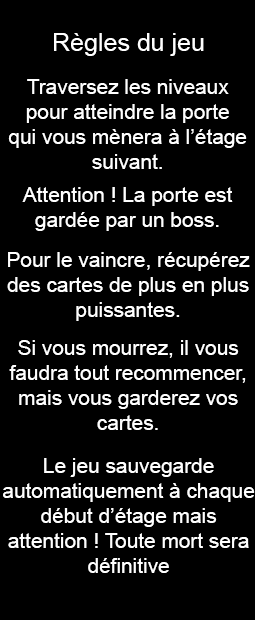
<style>
.page{position:relative;width:255px;height:620px;background:#000000}
.page>*{position:absolute;margin:0}
.t1{font:25px "ArialMT";color:#ffffff}
.t2{font:20.8px "ArialMT";color:#ffffff}
</style>
<div class="page">
<p class="t1" style="left:54px;top:33px;width:150px;height:23px">Règles du jeu</p>
<p class="t2" style="left:8px;top:79px;width:239px;height:90px;text-align:center">Traversez les niveaux<br>pour atteindre la porte<br>qui vous mènera à l’étage suivant.</p>
<p class="t2" style="left:22px;top:187px;width:211px;height:44px;text-align:center">Attention ! La porte est gardée par un boss.</p>
<p class="t2" style="left:7px;top:252px;width:243px;height:69px;text-align:center">Pour le vaincre, récupérez des cartes de plus en plus puissantes.</p>
<p class="t2" style="left:9px;top:340px;width:237px;height:90px;text-align:center">Si vous mourrez, il vous faudra tout recommencer, mais vous garderez vos cartes.</p>
<p class="t2" style="left:3px;top:458px;width:252px;height:115px;text-align:center">Le jeu sauvegarde <br>automatiquement à chaque début d’étage mais <br>attention ! Toute mort sera définitive</p>
</div>
